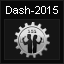
<style>
.page{position:relative;width:64px;height:64px;background:#090909}
.page>*{position:absolute;margin:0}
.t1{font:11px "ArialMT";color:#ffffff}
</style>
<div class="page">
<p class="t1" style="left:6px;top:6px;width:52px;height:8px">Dash-2015</p>
</div>
